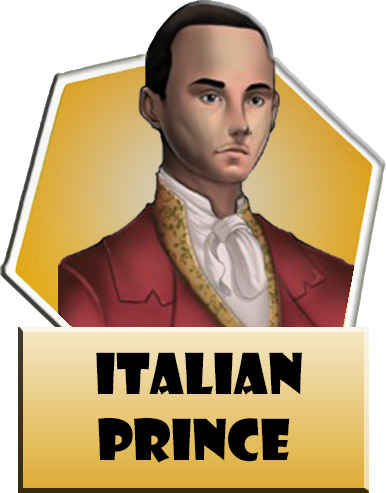
<style>
.page{position:relative;width:386px;height:493px;background:#ffffff}
.page>*{position:absolute;margin:0}
.t1{font:55px "ShowcardGothic-Reg";color:#000000}
</style>
<div class="page">
<p class="t1" style="left:96px;top:352px;width:206px;height:111px;text-align:center">Italian<br>Prince</p>
</div>
